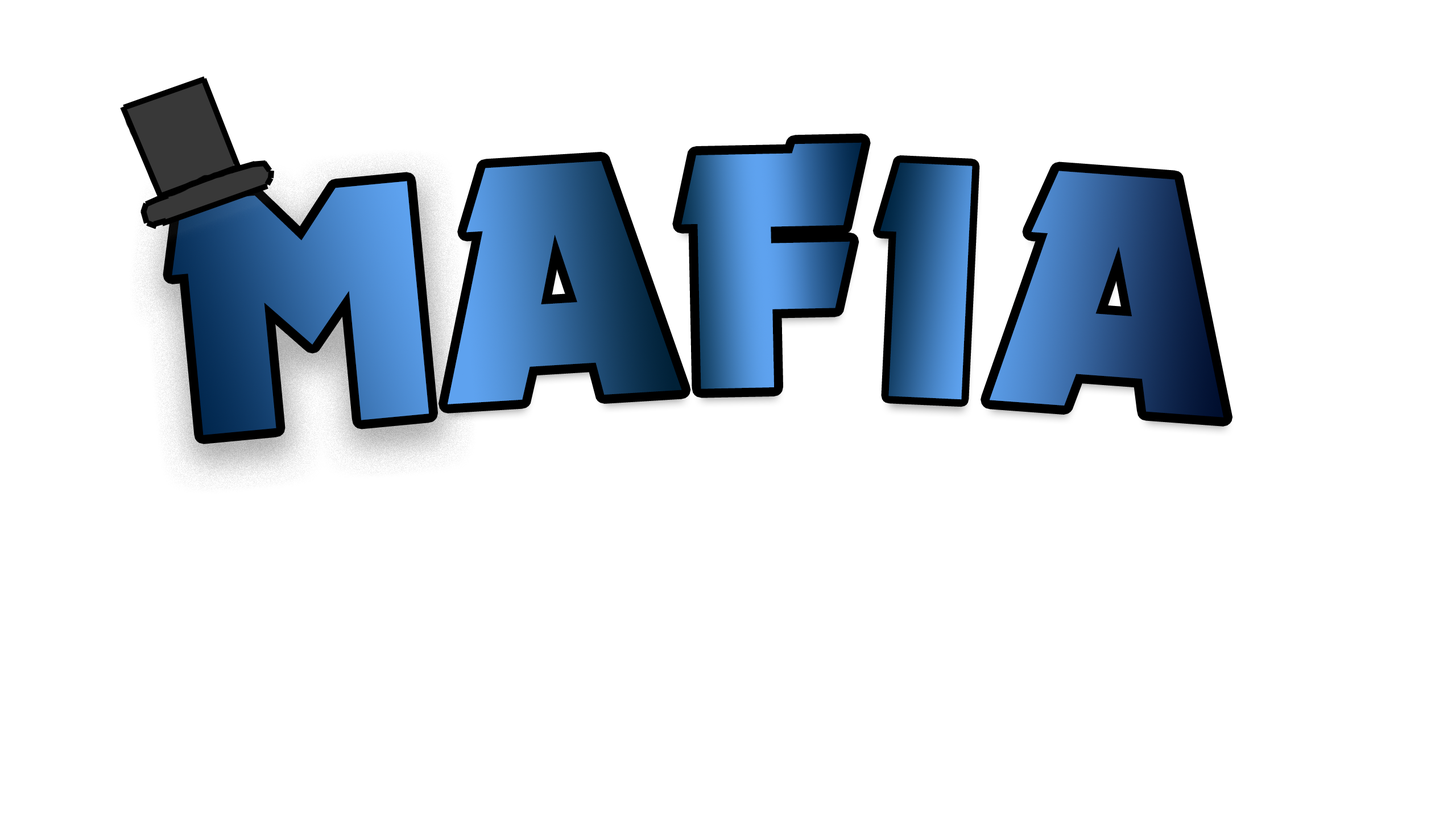
<style>
.page{position:relative;width:1456px;height:819px;background:#ffffff}
.page>*{position:absolute;margin:0}
.t1{font:341.2px "Nougat-ExtraBlack"}
</style>
<div class="page">
<p class="t1" style="left:681px;top:142px;width:181px;height:247px;rotate:-1deg">F</p>
<p class="t1" style="left:448px;top:161px;width:234px;height:243px;rotate:-4deg">A</p>
<p class="t1" style="left:880px;top:163px;width:93px;height:237px;rotate:3deg">I</p>
<p class="t1" style="left:990px;top:171px;width:234px;height:246px;rotate:4deg">A</p>
<p class="t1" style="left:172px;top:181px;width:257px;height:254px;rotate:-5deg">M</p>
</div>
